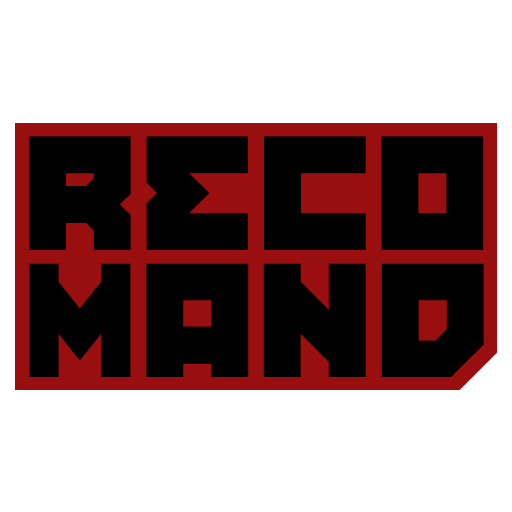
<style>
.page{position:relative;width:512px;height:512px;background:#ffffff}
.page>*{position:absolute;margin:0}
.t1{font:174.7px "EastBlocICGClosed";color:#000000}
.t2{font:174.2px "EastBlocICGClosed";color:#000000;scale:0.8 1}
.t3{font:174.2px "EastBlocICGClosed";color:#000000}
</style>
<div class="page">
<p class="t1" style="left:29px;top:136px;width:455px;height:114px">RECO</p>
<p class="t2" style="left:29px;top:263px;width:102px;height:114px">M</p>
<p class="t3" style="left:146px;top:263px;width:103px;height:114px">A</p>
<p class="t3" style="left:263px;top:263px;width:103px;height:114px">N</p>
<p class="t3" style="left:381px;top:263px;width:103px;height:114px">D</p>
</div>
